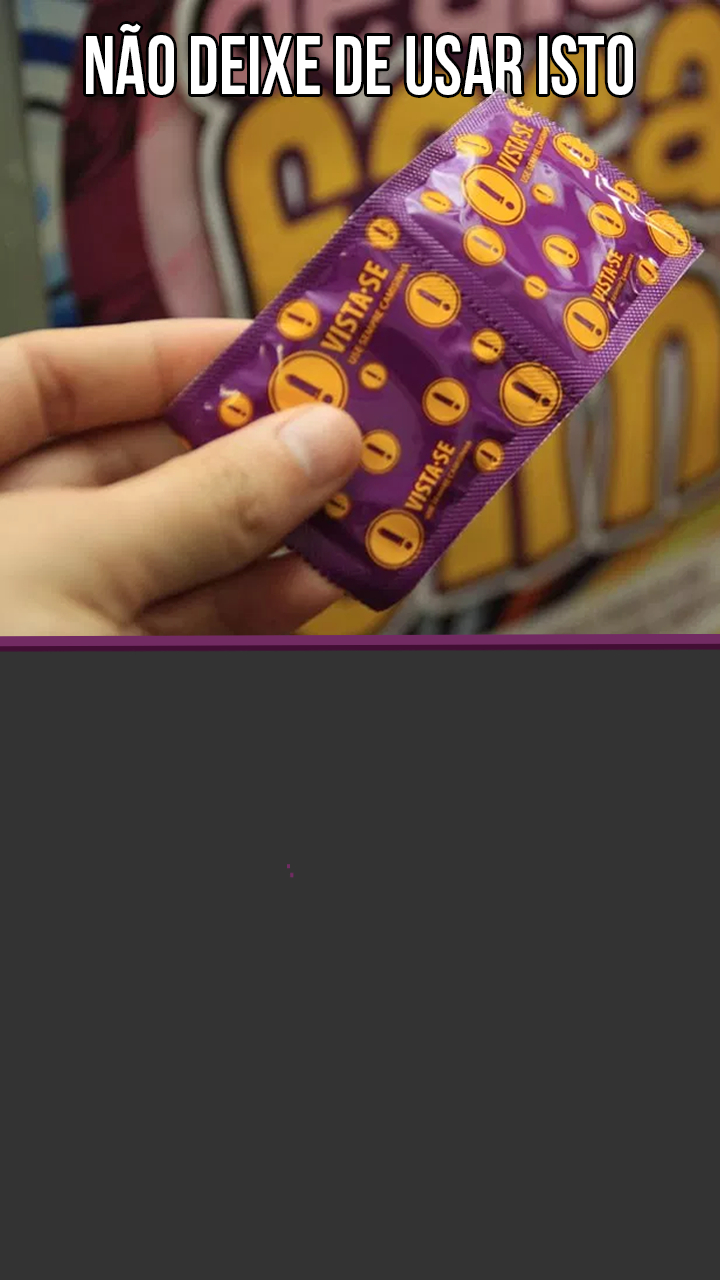
<style>
.page{position:relative;width:720px;height:1280px;background:#333333}
.page>*{position:absolute;margin:0}
.t1{font:83.3px "BebasNeueBold";color:#ffffff;scale:0.91 1}
</style>
<div class="page">
<p class="t1" style="left:86px;top:23px;width:547px;height:72px">Não deixe de usar isto</p>
</div>
